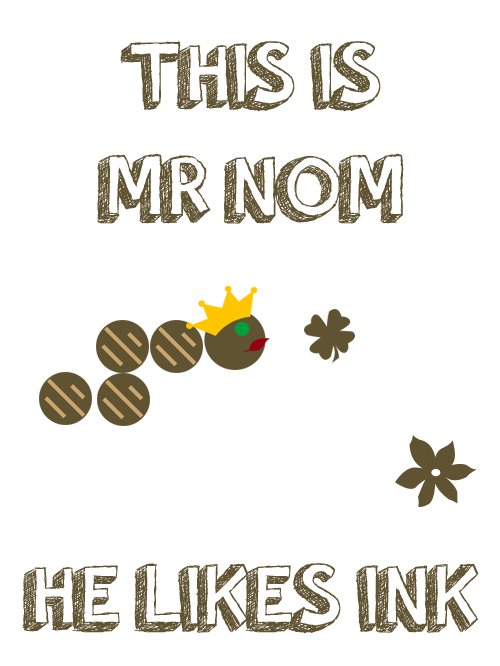
<style>
.page{position:relative;width:500px;height:666px;background:#ffffff}
.page>*{position:absolute;margin:0}
.t1{font:94px "orangejuice";color:#605332}
</style>
<div class="page">
<p class="t1" style="left:97px;top:40px;width:307px;height:184px;text-align:center">THIS IS<br>MR NOM</p>
<p class="t1" style="left:22px;top:563px;width:457px;height:71px">HE LIKES INK</p>
</div>
